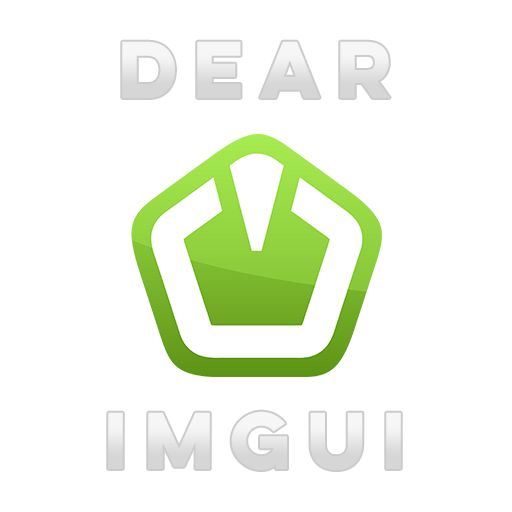
<style>
.page{position:relative;width:512px;height:512px;background:#ffffff}
.page>*{position:absolute;margin:0}
.t1{font:72px "LuloCleanW01-OneBold";color:#ffffff}
</style>
<div class="page">
<p class="t1" style="left:122px;top:41px;width:268px;height:57px">DEAR</p>
<p class="t1" style="left:108px;top:411px;width:293px;height:59px">IMGUI</p>
</div>
